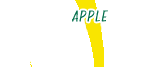
<style>
.page{position:relative;width:158px;height:67px;background:#ffffff}
.page>*{position:absolute;margin:0}
.t1{font:15px "TikiHoliday";letter-spacing:0.1em;color:#006d4a;font-weight:bold}
</style>
<div class="page">
<p class="t1" style="left:72px;top:10px;width:36px;height:12px">APPLE</p>
</div>
